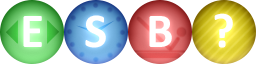
<style>
.page{position:relative;width:256px;height:64px;background:#ffffff}
.page>*{position:absolute;margin:0}
.t1{font:49px "Calibri-Bold";letter-spacing:-0.05em;color:#ffffff}
</style>
<div class="page">
<p class="t1" style="left:23px;top:16px;width:19px;height:31px">E</p>
<p class="t1" style="left:85px;top:15px;width:21px;height:33px">S</p>
<p class="t1" style="left:149px;top:16px;width:23px;height:31px">B</p>
<p class="t1" style="left:214px;top:13px;width:19px;height:35px">?</p>
</div>
